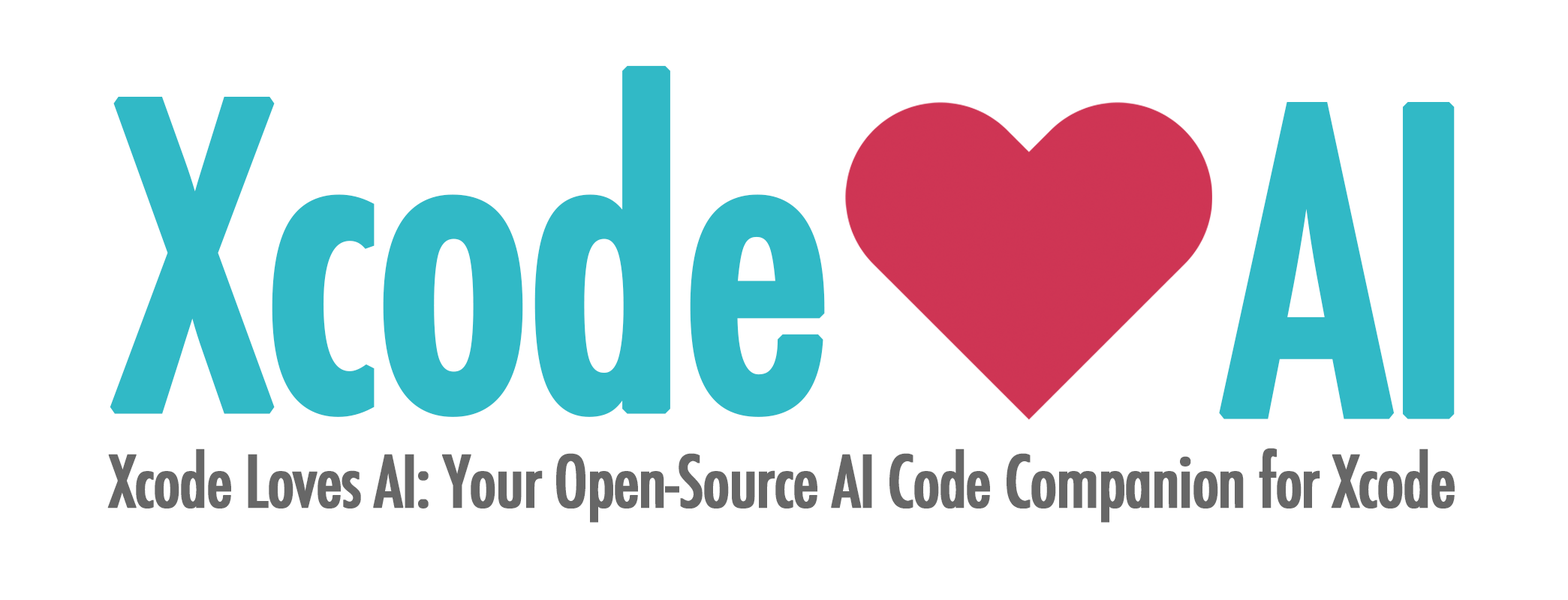
<style>
.page{position:relative;width:1568px;height:600px;background:#ffffff}
.page>*{position:absolute;margin:0}
.t1{font:407.3px "Futura-CondensedMedium";letter-spacing:-0.04em;color:#31b9c6;font-weight:bold}
.t2{font:70px "Futura-CondensedMedium";letter-spacing:-0.04em;color:#676767;font-weight:bold}
</style>
<div class="page">
<p class="t1" style="left:110px;top:65px;width:715px;height:352px">Xcode</p>
<p class="t1" style="left:1219px;top:102px;width:236px;height:318px">AI</p>
<p class="t2" style="left:107px;top:448px;width:1348px;height:75px">Xcode Loves AI: Your Open-Source AI Code Companion for Xcode</p>
</div>
